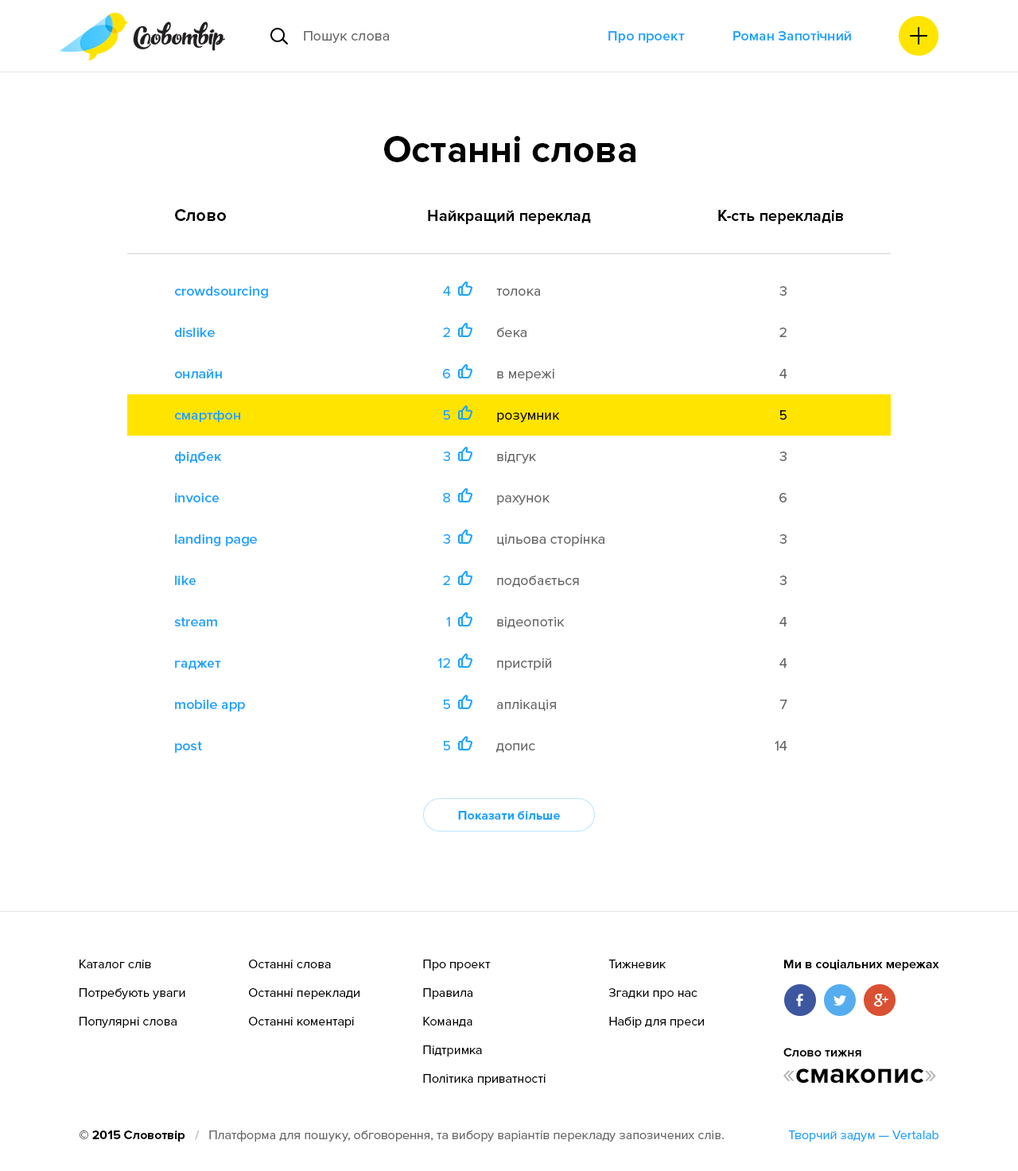
<style>
.page{position:relative;width:1018px;height:1171px;background:#ffffff}
.page>*{position:absolute;margin:0}
.t1{font:14.3px "ProximaNova-Regular";color:#666666}
.t2{font:14.3px "ProximaNova-Semibold";color:#17a2ff}
.t3{font:38.2px "ProximaNova-Bold";color:#000000}
.t4{font:17.5px "ProximaNova-Bold";color:#000000}
.t5{font:15.9px "ProximaNova-Bold";color:#000000}
.t6{font:14.3px/41.4px "ProximaNova-Semibold";color:#17a2ff}
.t7{font:14.3px/41.4px "ProximaNova-Regular";color:#17a2ff}
.t8{font:14.3px/41.4px "ProximaNova-Regular";color:#666666}
.t9{font:14.3px/41.4px "ProximaNova-Regular";color:#000000}
.t10{font:12.7px "ProximaNova-Bold";color:#17a2ff}
.t11{font:12.7px/28.6px "ProximaNova-Regular";color:#000000}
.t12{font:12.7px/28.6px "ProximaNova-Regular";color:#010101}
.t13{font:12.7px "ProximaNova-Bold";color:#010101}
.t14{font:28.6px "ProximaNova-Bold";color:#000000}
.t15{font:28.6px "ProximaNova-Regular";color:#b3b3b3}
.t16{font:12.7px "ProximaNova-Regular";color:#666666}
.t17{font:12.7px "ProximaNova-Bold";color:#000000}
.t18{font:12.7px "ProximaNova-Bold";color:#bfbfbf}
.t19{font:12.7px "ProximaNova-Regular";color:#17a2ff}
</style>
<div class="page">
<p class="t1" style="left:304px;top:31px;width:85px;height:12px">Пошук слова</p>
<p class="t2" style="left:608px;top:31px;width:77px;height:12px">Про проект</p>
<p class="t2" style="left:733px;top:31px;width:118px;height:10px">Роман Запотічний</p>
<p class="t3" style="left:384px;top:136px;width:251px;height:26px">Останні слова</p>
<p class="t4" style="left:175px;top:209px;width:51px;height:12px">Слово</p>
<p class="t5" style="left:428px;top:210px;width:163px;height:14px">Найкращий переклад</p>
<p class="t5" style="left:718px;top:210px;width:125px;height:14px">К-сть перекладів</p>
<p class="t6" style="left:174px;top:286px;width:94px;height:467px">crowdsourcing<br>dislike<br>онлайн<br>смартфон<br>фідбек<br>invoice<br>landing page<br>like<br>stream<br>гаджет<br>mobile app<br>post</p>
<p class="t7" style="left:437px;top:286px;width:14px;height:465px;text-align:right">4<br>2<br>6<br>5<br>3<br>8<br>3<br>2<br>1<br>12<br>5<br>5</p>
<p class="t8" style="left:496px;top:289px;width:108px;height:464px">толока<br>бека<br>в мережі<br><span class="t9">розумник<br></span>відгук<br>рахунок<br>цільова сторінка<br>подобається<br>відеопотік<br>пристрій<br>аплікація<br>допис</p>
<p class="t8" style="left:775px;top:286px;width:12px;height:465px;text-align:right">3<br>2<br>4<br><span class="t9">5<br></span>3<br>6<br>3<br>3<br>4<br>4<br>7<br>14</p>
<p class="t10" style="left:458px;top:811px;width:102px;height:9px">Показати більше</p>
<p class="t11" style="left:80px;top:960px;width:105px;height:68px">Каталог слів<br>Потребують уваги<br>Популярні слова</p>
<p class="t11" style="left:249px;top:960px;width:110px;height:68px">Останні слова<br>Останні переклади<br>Останні коментарі</p>
<p class="t11" style="left:423px;top:960px;width:123px;height:126px">Про проект<br>Правила<br>Команда<br>Підтримка<br>Політика приватності</p>
<p class="t12" style="left:608px;top:960px;width:96px;height:68px">Тижневик<br>Згадки про нас<br>Набір для преси</p>
<p class="t13" style="left:784px;top:960px;width:155px;height:11px">Ми в соціальних мережах</p>
<p class="t13" style="left:783px;top:1048px;width:78px;height:9px">Слово тижня</p>
<p class="t14" style="left:783px;top:1069px;width:153px;height:15px"><span class="t15">«</span>смакопис<span class="t15">»</span></p>
<p class="t16" style="left:80px;top:1131px;width:644px;height:11px"><span class="t17">© 2015 Словотвір   </span><span class="t18">/   </span>Платформа для пошуку, обговорення, та вибору варіантів перекладу запозичених слів.</p>
<p class="t19" style="left:788px;top:1131px;width:150px;height:11px">Творчий задум — Vertalab</p>
</div>
